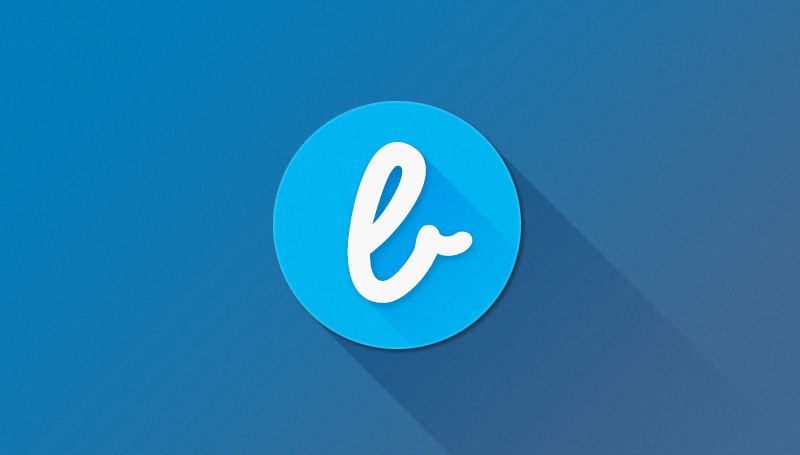
<style>
.page{position:relative;width:800px;height:455px}
.page>*{position:absolute;margin:0}
.t1{font:187.1px "KGAlwaysAGoodTime";color:#ffffff}
</style>
<div class="page">
<p class="t1" style="left:347px;top:142px;width:126px;height:161px">b</p>
</div>
